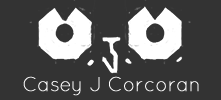
<style>
.page{position:relative;width:221px;height:100px;background:#333333}
.page>*{position:absolute;margin:0}
.t1{font:20px "Quicksand-Light";color:#ffffff;font-weight:bold;scale:0.95 1}
</style>
<div class="page">
<p class="t1" style="left:23px;top:76px;width:176px;height:20px">Casey J Corcoran</p>
</div>
